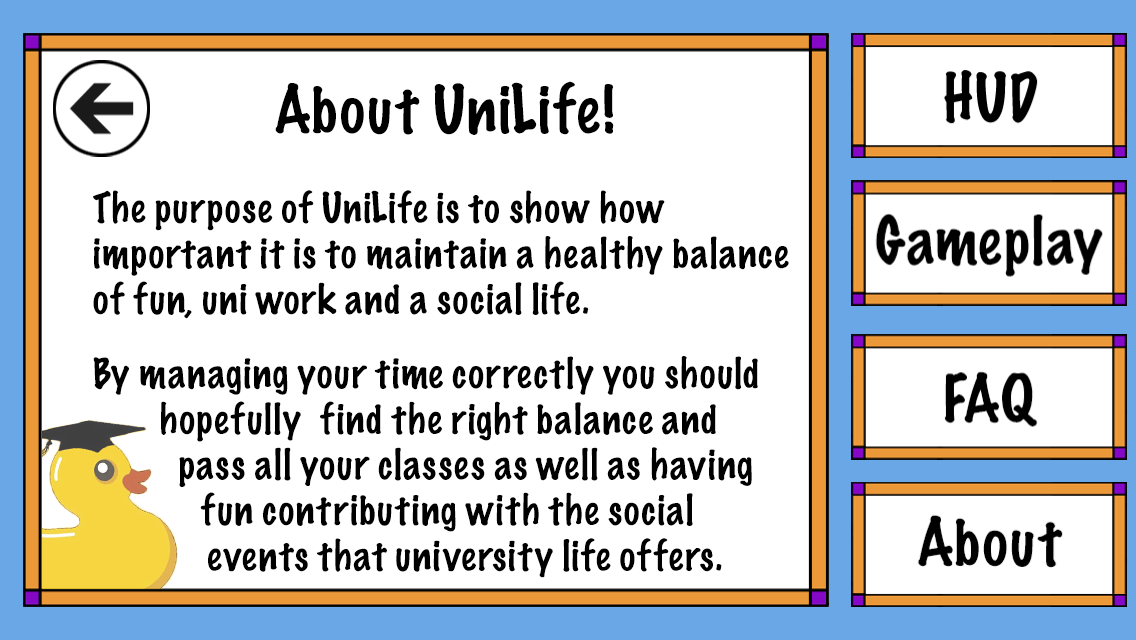
<style>
.page{position:relative;width:1136px;height:640px;background:#ffffff}
.page>*{position:absolute;margin:0}
.t1{font:60px "MarkerFelt-Thin";color:#000000}
.t2{font:38px "MarkerFelt-Thin";color:#000000}
</style>
<div class="page">
<p class="t1" style="left:275px;top:81px;width:339px;height:54px">About UniLife!</p>
<p class="t2" style="left:93px;top:190px;width:696px;height:388px">The purpose of UniLife is to show how <br>important it is to maintain a healthy balance <br>of fun, uni work and a social life.<br><br>By managing your time correctly you should<br>       hopefully  find the right balance and <br>         pass all your classes as well as having<br>       fun contributing with the social <br>            events that university life offers.</p>
</div>
